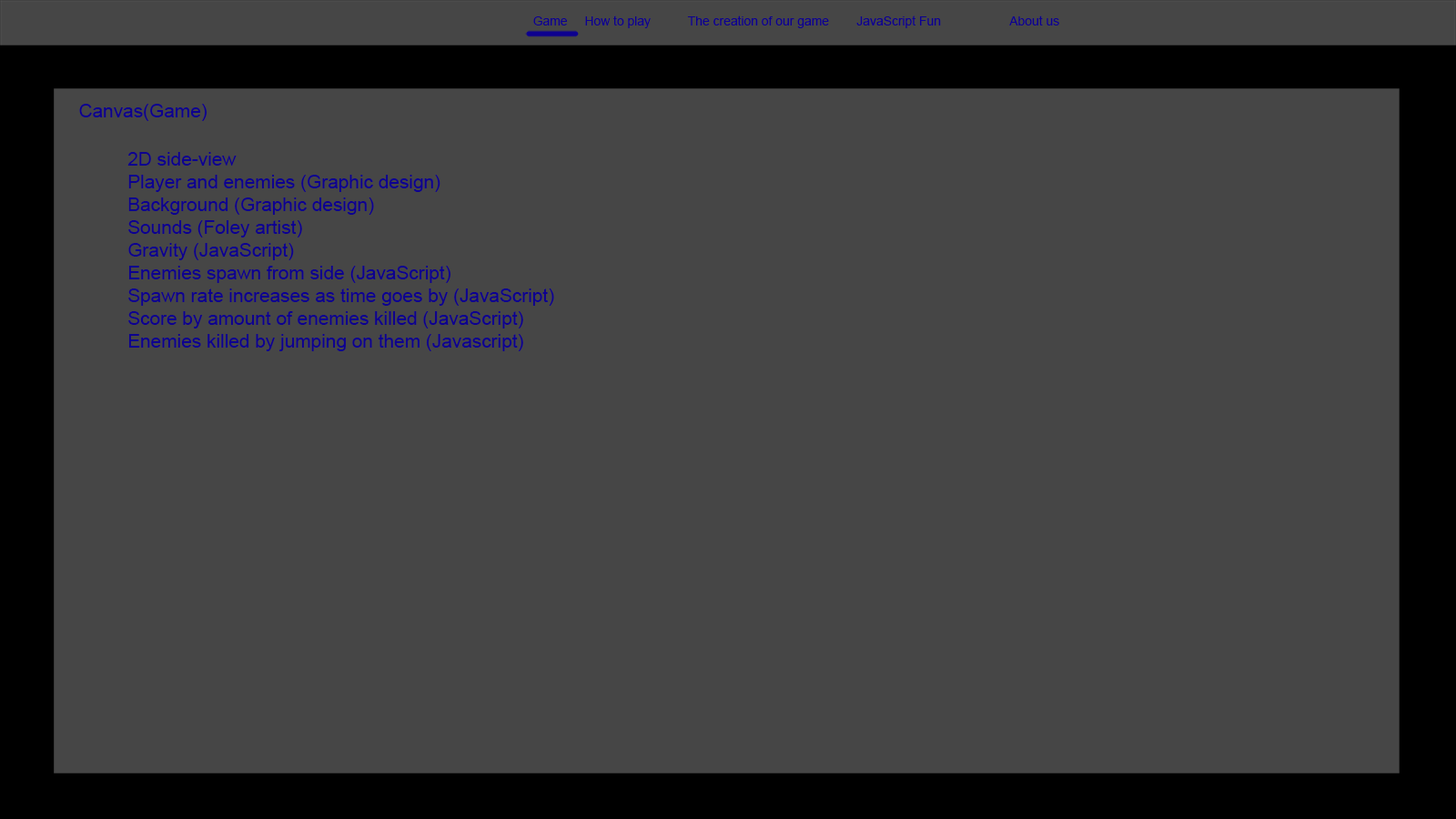
<style>
.page{position:relative;width:1456px;height:819px;background:#464646}
.page>*{position:absolute;margin:0}
.t1{font:12.6px "ArialMT";color:#0d008f}
.t2{font:12.7px "ArialMT";color:#0d008f}
.t3{font:19px "ArialMT";color:#0d008f}
.t4{font:4.5px "ArialMT";color:#0d008f}
</style>
<div class="page">
<p class="t1" style="left:533px;top:16px;width:34px;height:9px">Game</p>
<p class="t1" style="left:585px;top:15px;width:66px;height:13px">How to play</p>
<p class="t1" style="left:687px;top:15px;width:142px;height:13px">The creation of our game</p>
<p class="t2" style="left:856px;top:15px;width:85px;height:13px">JavaScript Fun</p>
<p class="t2" style="left:1009px;top:15px;width:50px;height:10px">About us</p>
<p class="t3" style="left:79px;top:104px;width:128px;height:17px">Canvas(Game)</p>
<p class="t4" style="left:127px;top:152px;width:427px;height:199px">2D side-view<br>Player and enemies (Graphic design)<br>Background (Graphic design)<br>Sounds (Foley artist)<br>Gravity (JavaScript)<br>Enemies spawn from side (JavaScript)<br>Spawn rate increases as time goes by (JavaScript)<br>Score by amount of enemies killed (JavaScript)<br>Enemies killed by jumping on them (Javascript)</p>
</div>
